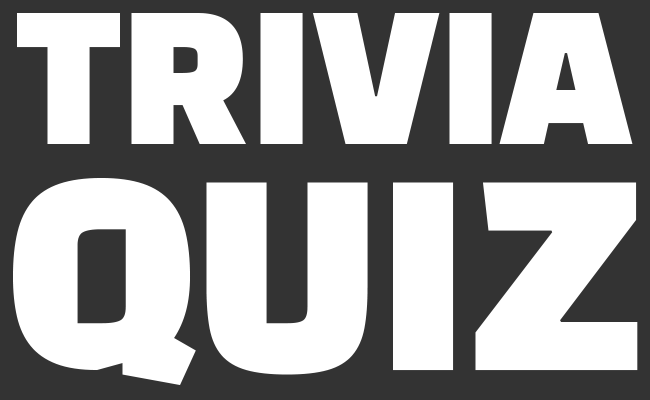
<style>
.page{position:relative;width:650px;height:400px;background:#ffffff}
.page>*{position:absolute;margin:0}
.t1{font:175px "BlackHanSans-Regular";color:#ffffff}
.t2{font:250px "BlackHanSans-Regular";color:#ffffff}
</style>
<div class="page">
<p class="t1" style="left:17px;top:13px;width:616px;height:131px">TRIVIA</p>
<p class="t2" style="left:13px;top:178px;width:625px;height:207px">QUIZ</p>
</div>
